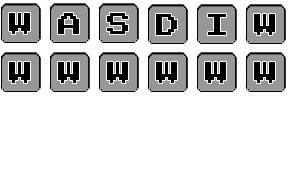
<style>
.page{position:relative;width:300px;height:190px;background:#ffffff}
.page>*{position:absolute;margin:0}
.t1{font:24px "PressStart2P-Regular";color:#000000}
</style>
<div class="page">
<p class="t1" style="left:9px;top:13px;width:21px;height:21px">W</p>
<p class="t1" style="left:58px;top:13px;width:21px;height:21px">A</p>
<p class="t1" style="left:107px;top:13px;width:21px;height:21px">S</p>
<p class="t1" style="left:156px;top:14px;width:21px;height:21px">D</p>
<p class="t1" style="left:208px;top:14px;width:18px;height:21px">I</p>
<p class="t1" style="left:254px;top:14px;width:21px;height:21px">W</p>
<p class="t1" style="left:9px;top:62px;width:21px;height:21px">W</p>
<p class="t1" style="left:58px;top:62px;width:21px;height:21px">W</p>
<p class="t1" style="left:107px;top:62px;width:21px;height:21px">W</p>
<p class="t1" style="left:156px;top:62px;width:21px;height:21px">W</p>
<p class="t1" style="left:205px;top:62px;width:21px;height:21px">W</p>
<p class="t1" style="left:254px;top:62px;width:21px;height:21px">W</p>
</div>
